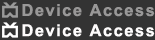
<style>
.page{position:relative;width:155px;height:40px;background:#333333}
.page>*{position:absolute;margin:0}
.t1{font:16.6px "Arial-BoldMT";letter-spacing:0.085em;color:#999898}
.t2{font:16.6px "Arial-BoldMT";letter-spacing:0.085em;color:#fefcfc}
</style>
<div class="page">
<p class="t1" style="left:22px;top:4px;width:133px;height:13px">Device Access</p>
<p class="t2" style="left:22px;top:24px;width:133px;height:13px">Device Access</p>
</div>
